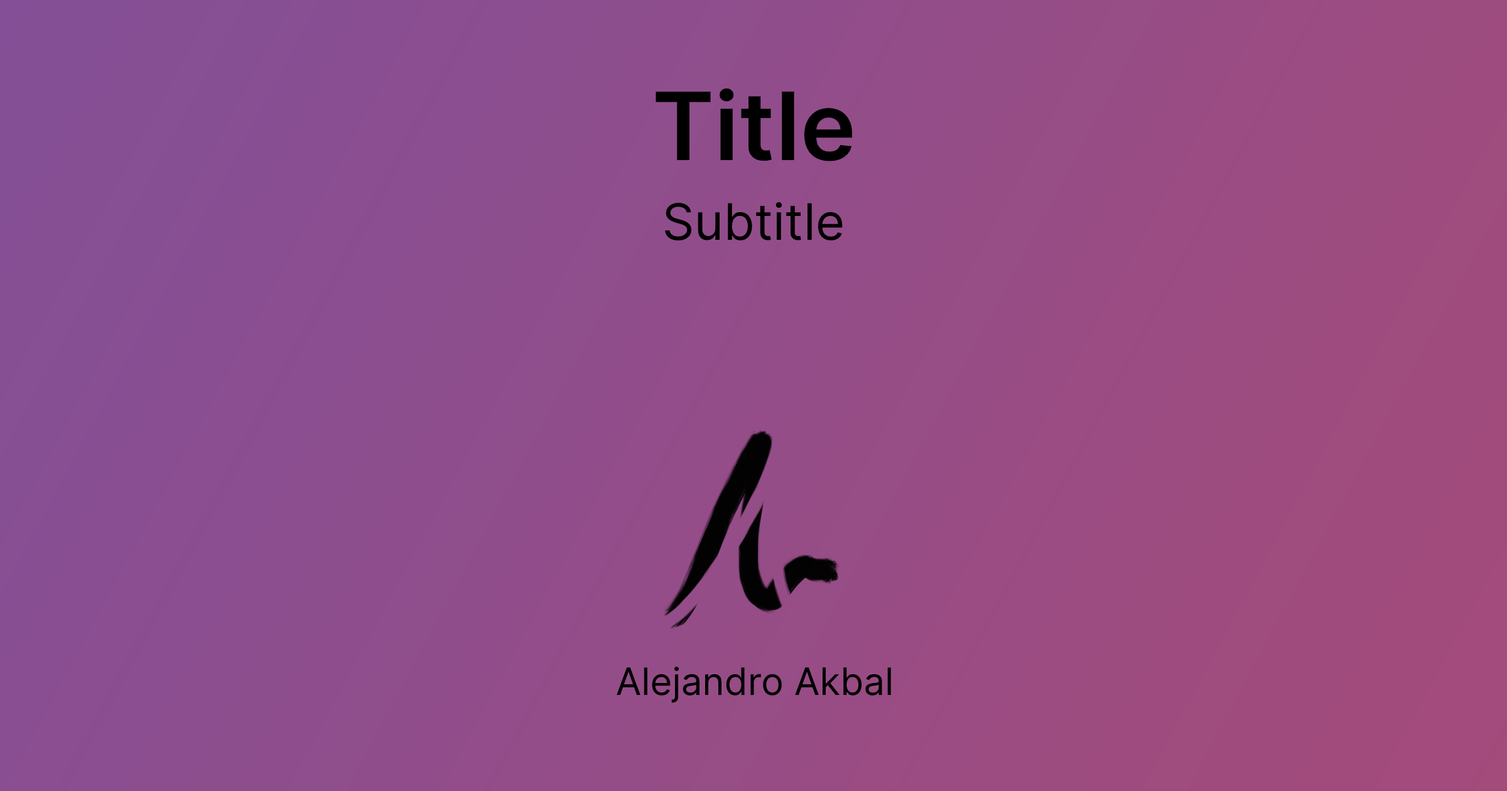
<style>
.page{position:relative;width:1507px;height:791px}
.page>*{position:absolute;margin:0}
.t1{font:94.2px "Inter-SemiBold";color:#000000}
.t2{font:50.2px "Inter-Regular";color:#000000}
.t3{font:37.7px "Inter-Regular";color:#000000}
</style>
<div class="page">
<p class="t1" style="left:656px;top:88px;width:196px;height:73px">Title</p>
<p class="t2" style="left:665px;top:202px;width:178px;height:39px">Subtitle</p>
<p class="t3" style="left:617px;top:667px;width:274px;height:36px">Alejandro Akbal</p>
</div>
